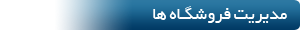
<style>
.page{position:relative;width:300px;height:30px;background:#ffffff}
.page>*{position:absolute;margin:0}
.t1{font:18.3px "BYekan";color:#ffffff}
</style>
<div class="page">
<p class="t1" style="left:153px;top:6px;width:134px;height:17px">مدیریت فروشگـاه ها</p>
</div>
